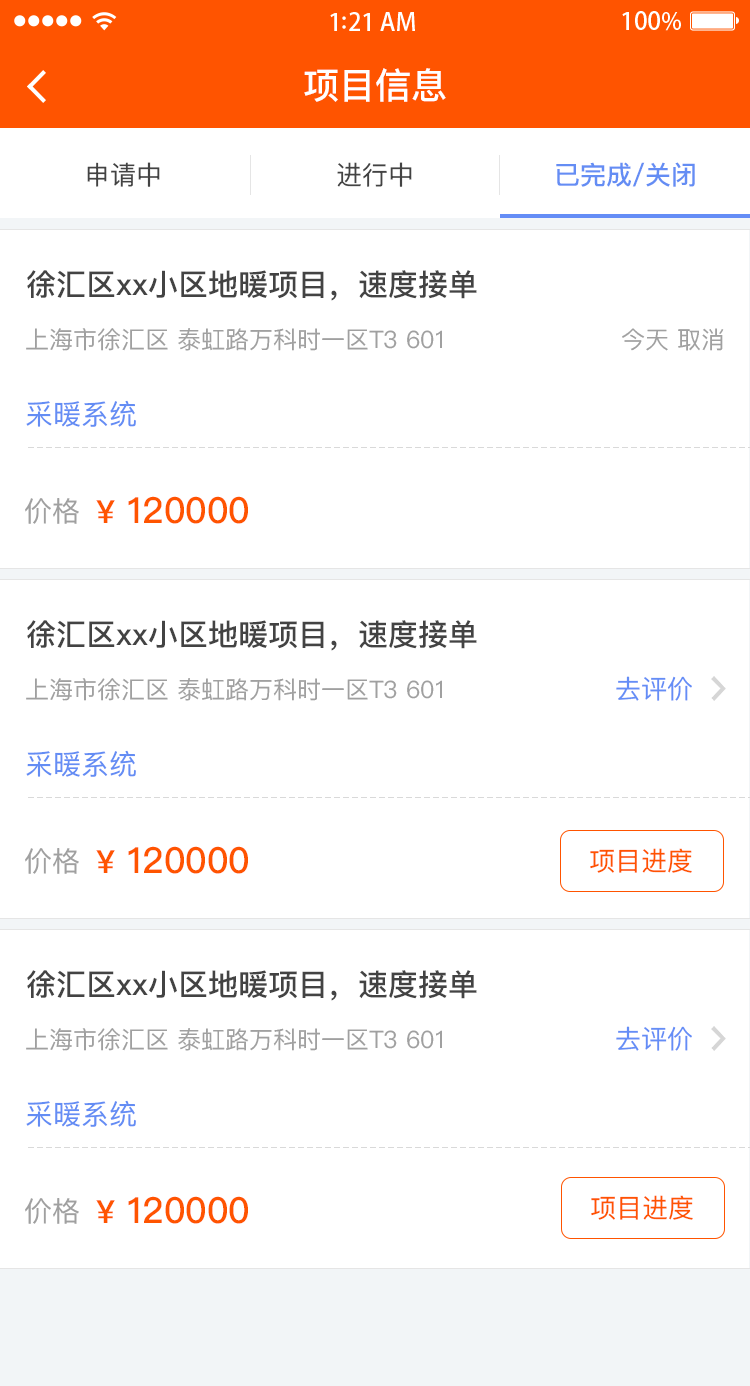
<style>
.page{position:relative;width:750px;height:1386px;background:#ffffff}
.page>*{position:absolute;margin:0}
.t1{font:36px "PingFangSC-Medium";color:#ffffff}
.t2{font:26px "PingFangSC-Regular";color:#434343}
.t3{font:26px "PingFangSC-Medium";color:#648df4}
.t4{font:30px "PingFangSC-Medium";color:#434343}
.t5{font:24px "PingFangSC-Regular";color:#a0a0a0}
.t6{font:28px "PingFangSC-Regular";color:#648df4}
.t7{font:36px "PingFangSC-Medium";color:#ff5400}
.t8{font:32px "PingFangSC-Medium";color:#ff5400}
.t9{font:28px "PingFangSC-Regular";color:#a0a0a0}
.t10{font:26px "PingFangSC-Regular";color:#648df6}
.t11{font:26px "PingFangSC-Regular";color:#ff5400}
</style>
<div class="page">
<p class="t1" style="left:304px;top:68px;width:142px;height:34px">项目信息</p>
<p class="t2" style="left:87px;top:162px;width:73px;height:25px">申请中</p>
<p class="t2" style="left:337px;top:162px;width:75px;height:25px">进行中</p>
<p class="t3" style="left:556px;top:162px;width:139px;height:25px">已完成/关闭</p>
<p class="t4" style="left:27px;top:270px;width:450px;height:31px">徐汇区xx小区地暖项目，速度接单</p>
<p class="t5" style="left:26px;top:328px;width:416px;height:23px">上海市徐汇区 泰虹路万科时一区T3 601</p>
<p class="t5" style="left:622px;top:328px;width:102px;height:23px">今天 取消</p>
<p class="t6" style="left:26px;top:400px;width:110px;height:27px">采暖系统</p>
<p class="t7" style="left:96px;top:496px;width:152px;height:28px"><span class="t8">¥</span> 120000</p>
<p class="t9" style="left:25px;top:498px;width:54px;height:26px">价格</p>
<p class="t4" style="left:27px;top:620px;width:450px;height:31px">徐汇区xx小区地暖项目，速度接单</p>
<p class="t5" style="left:26px;top:678px;width:416px;height:23px">上海市徐汇区 泰虹路万科时一区T3 601</p>
<p class="t10" style="left:616px;top:676px;width:76px;height:25px">去评价</p>
<p class="t6" style="left:26px;top:750px;width:110px;height:27px">采暖系统</p>
<p class="t7" style="left:96px;top:846px;width:152px;height:28px"><span class="t8">¥</span> 120000</p>
<p class="t9" style="left:25px;top:848px;width:54px;height:26px">价格</p>
<p class="t11" style="left:590px;top:848px;width:102px;height:25px">项目进度</p>
<p class="t4" style="left:27px;top:970px;width:450px;height:31px">徐汇区xx小区地暖项目，速度接单</p>
<p class="t5" style="left:26px;top:1028px;width:416px;height:23px">上海市徐汇区 泰虹路万科时一区T3 601</p>
<p class="t10" style="left:616px;top:1026px;width:76px;height:25px">去评价</p>
<p class="t6" style="left:26px;top:1100px;width:110px;height:27px">采暖系统</p>
<p class="t9" style="left:25px;top:1198px;width:54px;height:26px">价格</p>
<p class="t7" style="left:96px;top:1196px;width:152px;height:28px"><span class="t8">¥</span> 120000</p>
<p class="t11" style="left:591px;top:1195px;width:102px;height:25px">项目进度</p>
</div>
